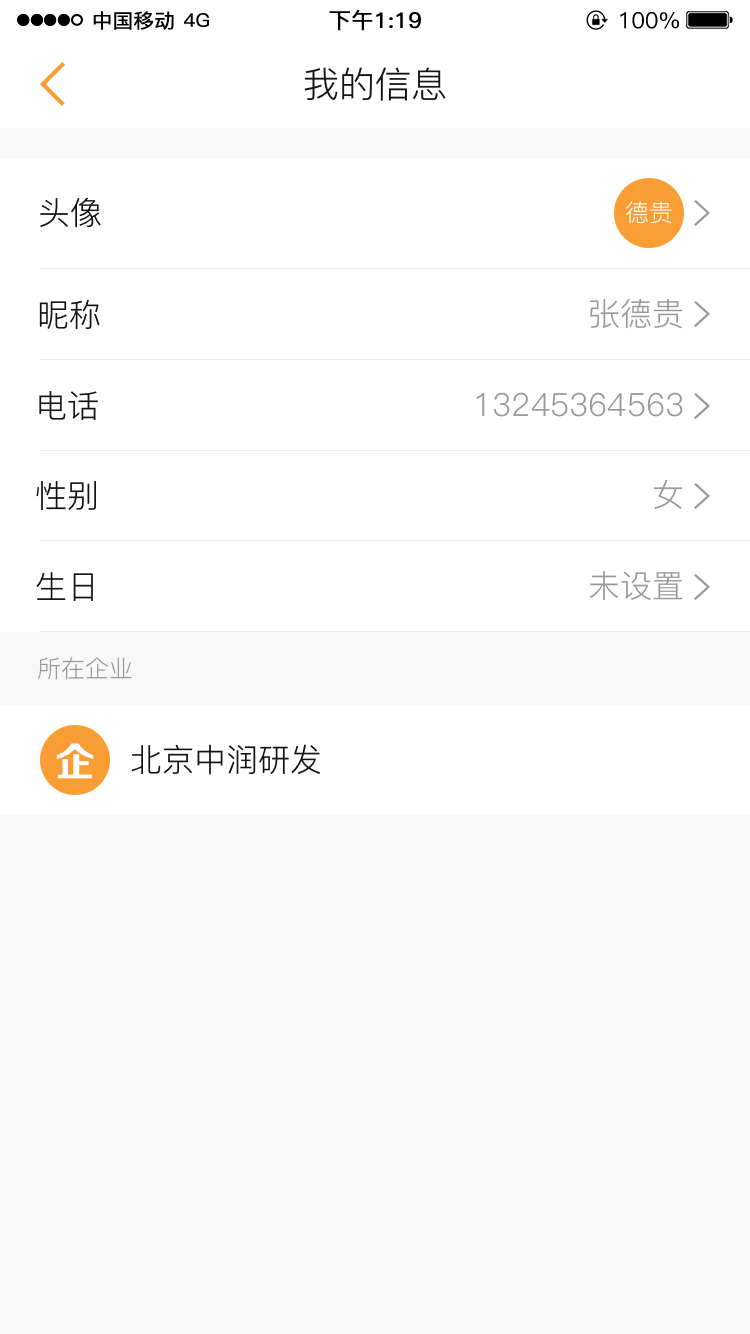
<style>
.page{position:relative;width:750px;height:1334px;background:#ffffff}
.page>*{position:absolute;margin:0}
.t1{font:36px "PingFang-SC-Regular";color:#141414}
.t2{font:32px "PingFang-SC-Regular";color:#141414}
.t3{font:24px "PingFang-SC-Regular";color:#ffffff}
.t4{font:32px "PingFang-SC-Regular";color:#999999}
.t5{font:24px "PingFang-SC-Regular";color:#999999}
.t6{font:40px "FZZCHJW--GB1-0";color:#ffffff}
</style>
<div class="page">
<p class="t1" style="left:304px;top:67px;width:142px;height:34px">我的信息</p>
<p class="t2" style="left:40px;top:197px;width:61px;height:31px">头像</p>
<p class="t3" style="left:626px;top:201px;width:46px;height:23px">德贵</p>
<p class="t2" style="left:39px;top:299px;width:61px;height:31px">昵称</p>
<p class="t4" style="left:590px;top:298px;width:93px;height:31px">张德贵</p>
<p class="t2" style="left:39px;top:391px;width:59px;height:30px">电话</p>
<p class="t4" style="left:476px;top:392px;width:207px;height:25px">13245364563</p>
<p class="t2" style="left:36px;top:481px;width:60px;height:29px">性别</p>
<p class="t4" style="left:653px;top:479px;width:30px;height:30px">女</p>
<p class="t2" style="left:36px;top:572px;width:57px;height:29px">生日</p>
<p class="t4" style="left:589px;top:571px;width:94px;height:29px">未设置</p>
<p class="t5" style="left:38px;top:657px;width:94px;height:23px">所在企业</p>
<p class="t6" style="left:56px;top:743px;width:38px;height:36px">企</p>
<p class="t2" style="left:131px;top:744px;width:189px;height:31px">北京中润研发</p>
</div>
